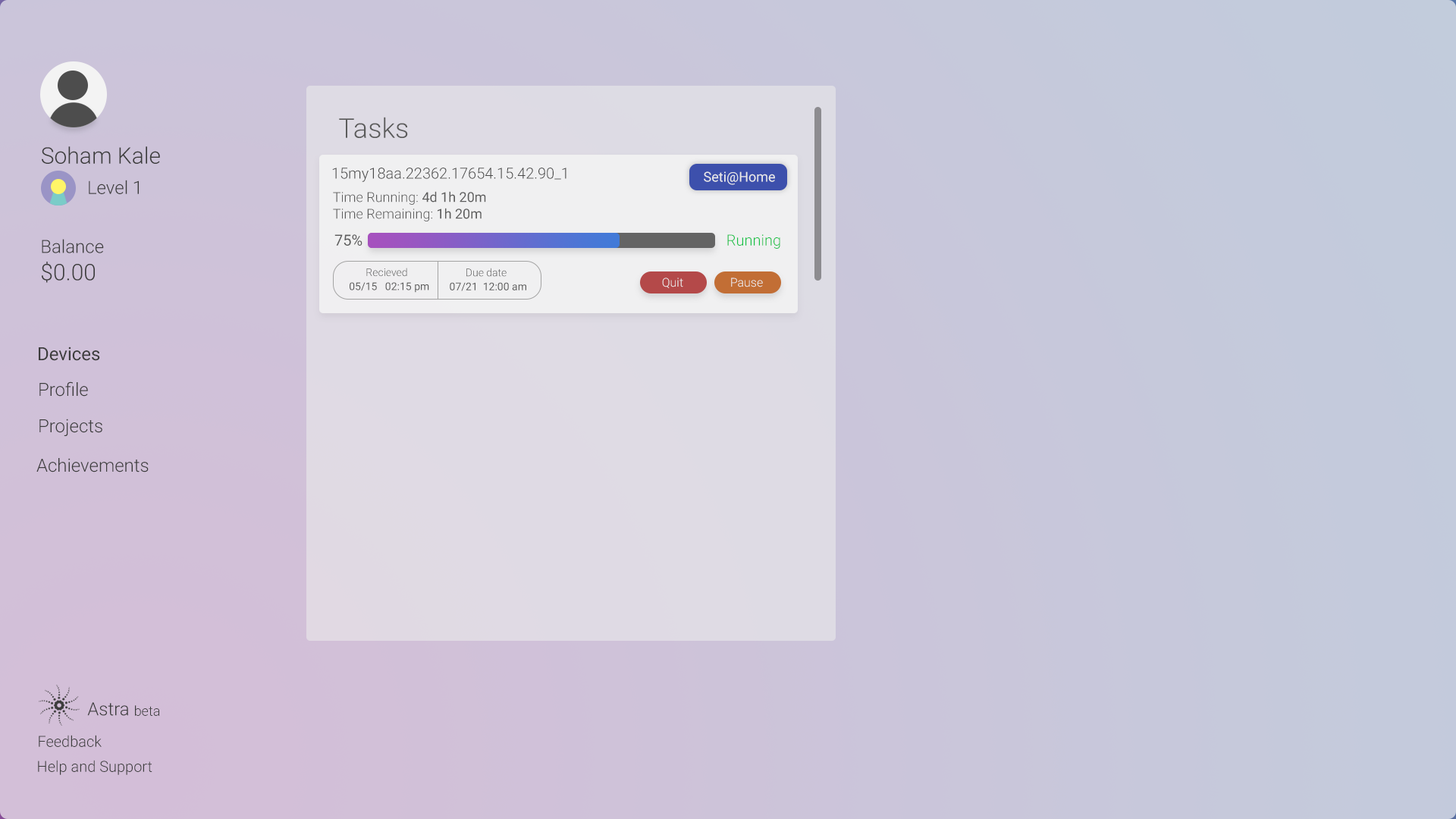
<style>
.page{position:relative;width:1456px;height:819px}
.page>*{position:absolute;margin:0}
.t1{font:27.3px "Roboto-Light";color:#5c5c5c}
.t2{font:22.7px "Roboto-Light";color:#3c3c3c}
.t3{font:15.2px "Roboto-Light";color:#4a4a4a}
.t4{font:13.6px "Roboto-Regular";color:#eaeaea}
.t5{font:18.2px "Roboto-Light";color:#3c3c3c}
.t6{font:13.6px "Roboto-Light";color:#5c5c5c}
.t7{font:13.6px "Roboto-Regular";color:#5c5c5c}
.t8{font:15.2px "Roboto-Regular";color:#5c5c5c}
.t9{font:15.2px "Roboto-Light";color:#14c145}
.t10{font:10.6px "Roboto-Light"}
.t11{font:12.1px "Roboto-Light";color:#efefef}
.t12{font:10.6px "Roboto-Regular";color:#5c5c5c}
.t13{font:18.2px "Roboto-Regular";color:#3c3c3c}
.t14{font:13.6px "Roboto-Light";color:#3c3c3c}
.t15{font:15.2px "Roboto-Light";color:#3c3c3c}
</style>
<div class="page">
<p class="t1" style="left:339px;top:117px;width:69px;height:21px">Tasks</p>
<p class="t2" style="left:42px;top:146px;width:118px;height:18px">Soham Kale</p>
<p class="t3" style="left:332px;top:168px;width:234px;height:14px">15my18aa.22362.17654.15.42.90_1</p>
<p class="t4" style="left:704px;top:171px;width:71px;height:14px">Seti@Home</p>
<p class="t5" style="left:89px;top:180px;width:50px;height:14px">Level 1</p>
<p class="t6" style="left:333px;top:191px;width:153px;height:14px">Time Running: <span class="t7">4d 1h 20m</span></p>
<p class="t6" style="left:333px;top:208px;width:149px;height:13px">Time Remaining: <span class="t7">1h 20m</span></p>
<p class="t5" style="left:42px;top:239px;width:62px;height:44px">Balance    <br><span class="t2">$0.00</span></p>
<p class="t8" style="left:334px;top:234px;width:28px;height:12px">75%</p>
<p class="t9" style="left:727px;top:234px;width:53px;height:15px">Running</p>
<p class="t10" style="left:366px;top:268px;width:41px;height:9px">Recieved</p>
<p class="t10" style="left:466px;top:268px;width:41px;height:9px">Due date</p>
<p class="t11" style="left:662px;top:278px;width:21px;height:10px">Quit</p>
<p class="t11" style="left:731px;top:278px;width:32px;height:9px">Pause</p>
<p class="t12" style="left:350px;top:282px;width:79px;height:11px">05/15   02:15 pm</p>
<p class="t12" style="left:450px;top:282px;width:76px;height:9px">07/21  12:00 am</p>
<p class="t13" style="left:39px;top:347px;width:61px;height:14px">Devices</p>
<p class="t5" style="left:39px;top:381px;width:49px;height:16px">Profile</p>
<p class="t5" style="left:39px;top:419px;width:63px;height:17px">Projects</p>
<p class="t5" style="left:36px;top:458px;width:113px;height:14px">Achievements</p>
<p class="t5" style="left:87px;top:702px;width:41px;height:14px">Astra</p>
<p class="t14" style="left:135px;top:705px;width:25px;height:11px">beta</p>
<p class="t15" style="left:39px;top:735px;width:63px;height:12px">Feedback</p>
<p class="t15" style="left:38px;top:760px;width:114px;height:15px">Help and Support</p>
</div>
